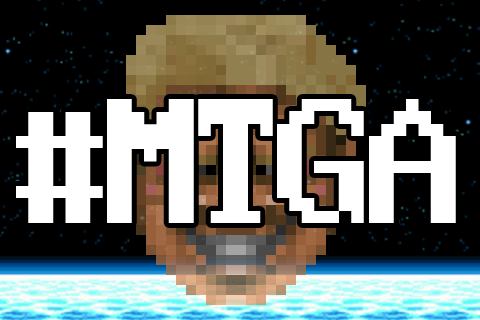
<style>
.page{position:relative;width:480px;height:320px;background:#000000}
.page>*{position:absolute;margin:0}
.t1{font:197.8px "PerfectDOSVGA437";letter-spacing:-0.1em;color:#ffffff}
.t2{font:197.8px "PerfectDOSVGA437";letter-spacing:-0.165em;color:#ffffff}
</style>
<div class="page">
<p class="t1" style="left:16px;top:99px;width:440px;height:124px">#<span class="t2">M</span>TGA</p>
</div>
